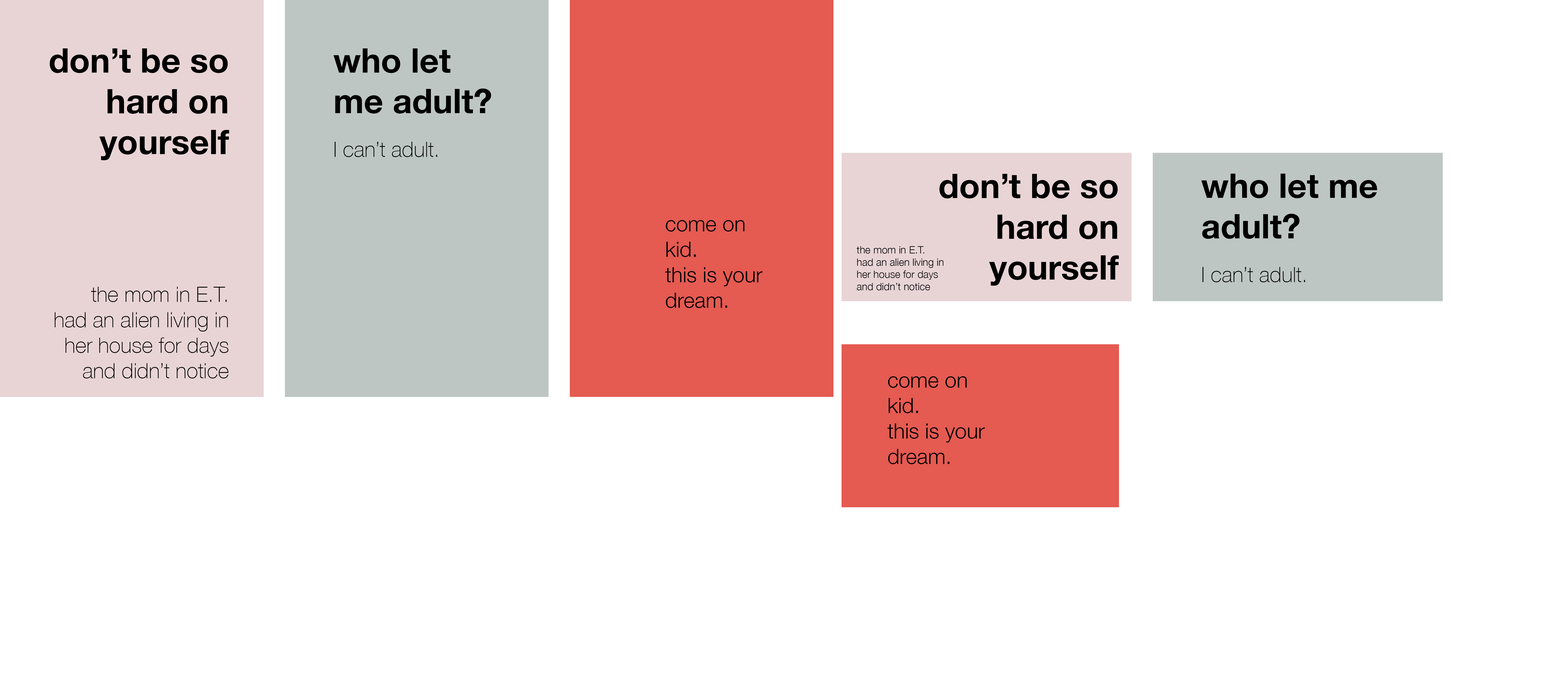
<style>
.page{position:relative;width:1568px;height:686px;background:#ffffff}
.page>*{position:absolute;margin:0}
.t1{font:21.2px "HelveticaNeue-Thin";color:#000000}
.t2{font:34px "HelveticaNeue-Bold";color:#000000}
.t3{font:33.8px "HelveticaNeue-Bold";color:#000000}
.t4{font:21.2px "HelveticaNeue-Light";color:#000000}
.t5{font:10.2px "HelveticaNeue-Light";color:#000000}
.t6{font:10.2px "HelveticaNeue-UltraLight";color:#000000}
</style>
<div class="page">
<p class="t1" style="left:50px;top:48px;width:179px;height:331px;text-align:right"><span class="t2">don’t be so hard on yourself<br><br><br><br> </span>the mom in E.T. <br>had an alien living in <br>her house for days <br>and didn’t notice</p>
<p class="t3" style="left:333px;top:48px;width:158px;height:109px">who let me adult?<br><br><span class="t1">I can’t adult.</span></p>
<p class="t2" style="left:939px;top:174px;width:180px;height:112px;text-align:right">don’t be so hard on yourself</p>
<p class="t3" style="left:1201px;top:174px;width:176px;height:108px">who let me adult?<br><br><span class="t1">I can’t adult.</span></p>
<p class="t4" style="left:665px;top:220px;width:98px;height:88px">come on kid.<br>this is your dream.</p>
<p class="t5" style="left:857px;top:246px;width:86px;height:44px"><span class="t6"><br></span>the mom in E.T. <br>had an alien living in <br>her house for days <br>and didn’t notice</p>
<p class="t4" style="left:887px;top:376px;width:98px;height:88px">come on kid.<br>this is your dream.</p>
</div>
